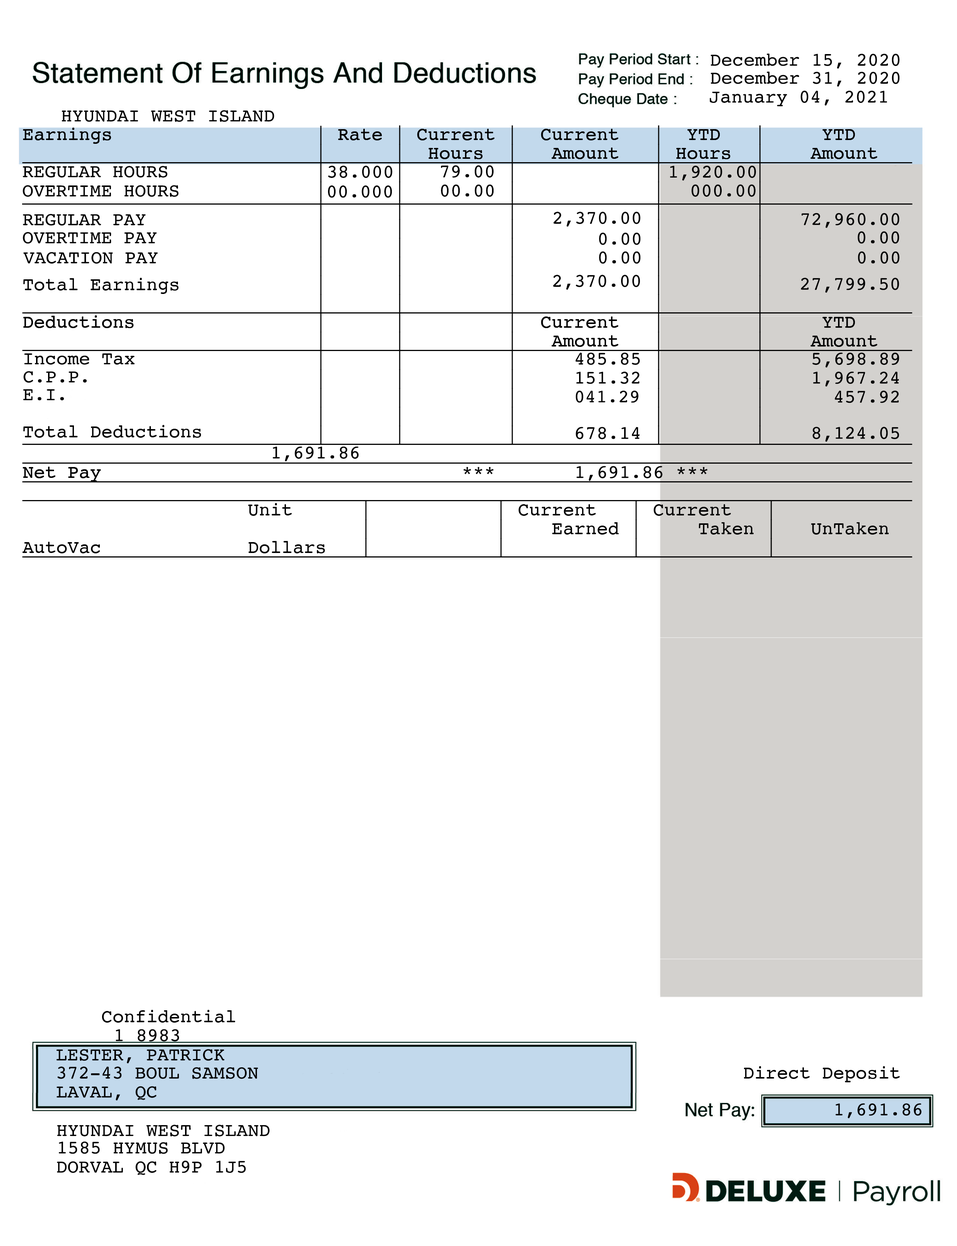
<style>
.page{position:relative;width:957px;height:1246px;background:#ffffff}
.page>*{position:absolute;margin:0}
.t1{font:18.8px "Courier";color:#000000}
.t2{font:18.4px "Courier";color:#000000}
</style>
<div class="page">
<p class="t1" style="left:711px;top:53px;width:189px;height:16px">December 15, 2020</p>
<p class="t1" style="left:711px;top:71px;width:189px;height:16px">December 31, 2020</p>
<p class="t1" style="left:710px;top:90px;width:177px;height:16px">January 04, 2021</p>
<p class="t1" style="left:62px;top:110px;width:212px;height:12px">HYUNDAI WEST ISLAND</p>
<p class="t1" style="left:23px;top:166px;width:144px;height:12px">REGULAR HOURS</p>
<p class="t1" style="left:328px;top:166px;width:65px;height:12px">38.000</p>
<p class="t1" style="left:441px;top:165px;width:53px;height:13px">79.00</p>
<p class="t1" style="left:670px;top:166px;width:86px;height:15px">1,920.00</p>
<p class="t1" style="left:23px;top:185px;width:156px;height:12px">OVERTIME HOURS</p>
<p class="t1" style="left:328px;top:185px;width:64px;height:13px">00.000</p>
<p class="t1" style="left:441px;top:184px;width:53px;height:13px">00.00</p>
<p class="t1" style="left:691px;top:184px;width:65px;height:13px">000.00</p>
<p class="t1" style="left:23px;top:214px;width:123px;height:12px">REGULAR PAY</p>
<p class="t1" style="left:553px;top:212px;width:88px;height:15px">2,370.00</p>
<p class="t1" style="left:801px;top:213px;width:98px;height:15px">72,960.00</p>
<p class="t1" style="left:23px;top:232px;width:134px;height:12px">OVERTIME PAY</p>
<p class="t1" style="left:599px;top:232px;width:42px;height:13px">0.00</p>
<p class="t1" style="left:858px;top:231px;width:41px;height:13px">0.00</p>
<p class="t1" style="left:23px;top:252px;width:135px;height:12px">VACATION PAY</p>
<p class="t1" style="left:599px;top:251px;width:42px;height:13px">0.00</p>
<p class="t1" style="left:858px;top:251px;width:42px;height:13px">0.00</p>
<p class="t1" style="left:553px;top:275px;width:87px;height:15px">2,370.00</p>
<p class="t1" style="left:801px;top:278px;width:98px;height:15px">27,799.50</p>
<p class="t1" style="left:24px;top:353px;width:111px;height:12px">Income Tax</p>
<p class="t1" style="left:575px;top:352px;width:65px;height:13px">485.85</p>
<p class="t1" style="left:812px;top:352px;width:87px;height:15px">5,698.89</p>
<p class="t1" style="left:23px;top:371px;width:64px;height:12px">C.P.P.</p>
<p class="t1" style="left:576px;top:372px;width:64px;height:12px">151.32</p>
<p class="t1" style="left:813px;top:372px;width:86px;height:15px">1,967.24</p>
<p class="t1" style="left:23px;top:389px;width:41px;height:12px">E.I.</p>
<p class="t2" style="left:576px;top:390px;width:62px;height:13px">041.29</p>
<p class="t1" style="left:835px;top:390px;width:64px;height:13px">457.92</p>
<p class="t1" style="left:576px;top:427px;width:64px;height:12px">678.14</p>
<p class="t1" style="left:813px;top:427px;width:86px;height:15px">8,124.05</p>
<p class="t1" style="left:273px;top:446px;width:86px;height:15px">1,691.86</p>
<p class="t1" style="left:577px;top:466px;width:86px;height:15px">1,691.86</p>
<p class="t1" style="left:116px;top:1029px;width:63px;height:12px">1 8983</p>
<p class="t1" style="left:56px;top:1049px;width:168px;height:14px">LESTER, PATRICK</p>
<p class="t1" style="left:57px;top:1066px;width:201px;height:13px">372-43 BOUL SAMSON</p>
<p class="t1" style="left:57px;top:1086px;width:100px;height:15px">LAVAL, QC</p>
<p class="t1" style="left:836px;top:1103px;width:86px;height:15px">1,691.86</p>
<p class="t1" style="left:57px;top:1125px;width:213px;height:12px">HYUNDAI WEST ISLAND</p>
<p class="t1" style="left:59px;top:1141px;width:166px;height:13px">1585 HYMUS BLVD</p>
<p class="t1" style="left:57px;top:1160px;width:189px;height:15px">DORVAL QC H9P 1J5</p>
</div>
